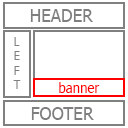
<style>
.page{position:relative;width:128px;height:128px;background:#ffffff}
.page>*{position:absolute;margin:0}
.t1{font:18px "Tahoma";color:#7f7f7f;scale:0.95 1}
.t2{font:12px "Tahoma";color:#7f7f7f;scale:0.95 1}
.t3{font:14px "Tahoma";color:#ff0000;scale:0.95 1}
</style>
<div class="page">
<p class="t1" style="left:30px;top:9px;width:63px;height:13px">HEADER</p>
<p class="t2" style="left:13px;top:37px;width:8px;height:52px">L<br>E<br>F<br>T</p>
<p class="t3" style="left:59px;top:82px;width:41px;height:11px">banner</p>
<p class="t1" style="left:31px;top:107px;width:63px;height:13px">FOOTER</p>
</div>
